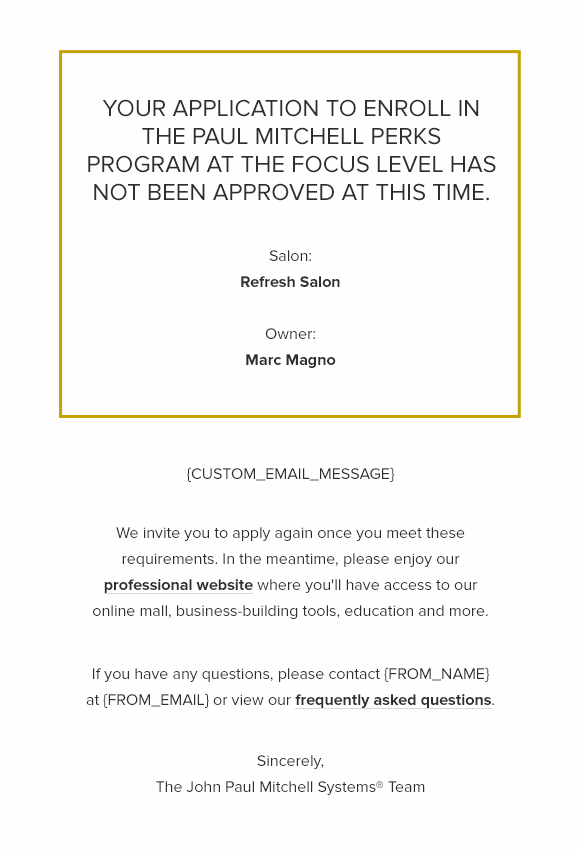
<style>
.page{position:relative;width:580px;height:850px;background:#fffefe}
.page>*{position:absolute;margin:0}
.t1{font:24px/28px "ProximaNova-Regular";color:#2e2e2e;text-transform:uppercase}
.t2{font:16px/26px "ProximaNova-Bold";color:#2e2e2e}
.t3{font:16px/26px "ProximaNova-Regular";color:#2e2e2e}
.t4{font:16px "ProximaNova-Regular";color:#2e2e2e}
.t5{font:16px/26px "ProximaNova-Bold";color:#2e2e2e;text-decoration:underline}
</style>
<div class="page">
<p class="t1" style="left:88px;top:99px;width:408px;height:102px;text-align:center">Your application to enroll in the Paul Mitchell Perks Program at the Focus level has not been approved at this time.</p>
<p class="t2" style="left:241px;top:250px;width:99px;height:118px;text-align:center"><span class="t3">Salon:<br></span>Refresh Salon<br><span class="t3"><br>Owner:<br></span>Marc Magno</p>
<p class="t4" style="left:187px;top:467px;width:207px;height:15px">{CUSTOM_EMAIL_MESSAGE}</p>
<p class="t3" style="left:93px;top:527px;width:395px;height:92px;text-align:center">We invite you to apply again once you meet these requirements. In the meantime, please enjoy our <span class="t5">professional website</span> where you'll have access to our online mall, business-building tools, education and more.</p>
<p class="t3" style="left:86px;top:667px;width:408px;height:42px;text-align:center">If you have any questions, please contact {FROM_NAME} at {FROM_EMAIL} or view our <span class="t5">frequently asked questions</span>.</p>
<p class="t3" style="left:156px;top:755px;width:269px;height:40px;text-align:center">Sincerely,<br>The John Paul Mitchell Systems® Team</p>
</div>
